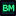
<style>
.page{position:relative;width:16px;height:16px;background:#08000b}
.page>*{position:absolute;margin:0}
.t1{font:8px "MSReferenceSansSerif";color:#3aff92}
</style>
<div class="page">
<p class="t1" style="left:3px;top:4px;width:12px;height:8px">BM</p>
</div>
